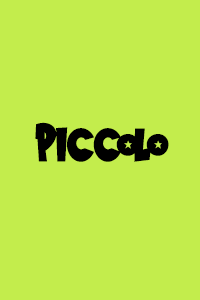
<style>
.page{position:relative;width:200px;height:300px;background:#c3ed4c}
.page>*{position:absolute;margin:0}
.t1{font:55px "SaiyanSans";color:#000000}
</style>
<div class="page">
<p class="t1" style="left:35px;top:122px;width:134px;height:40px">Piccolo</p>
</div>
